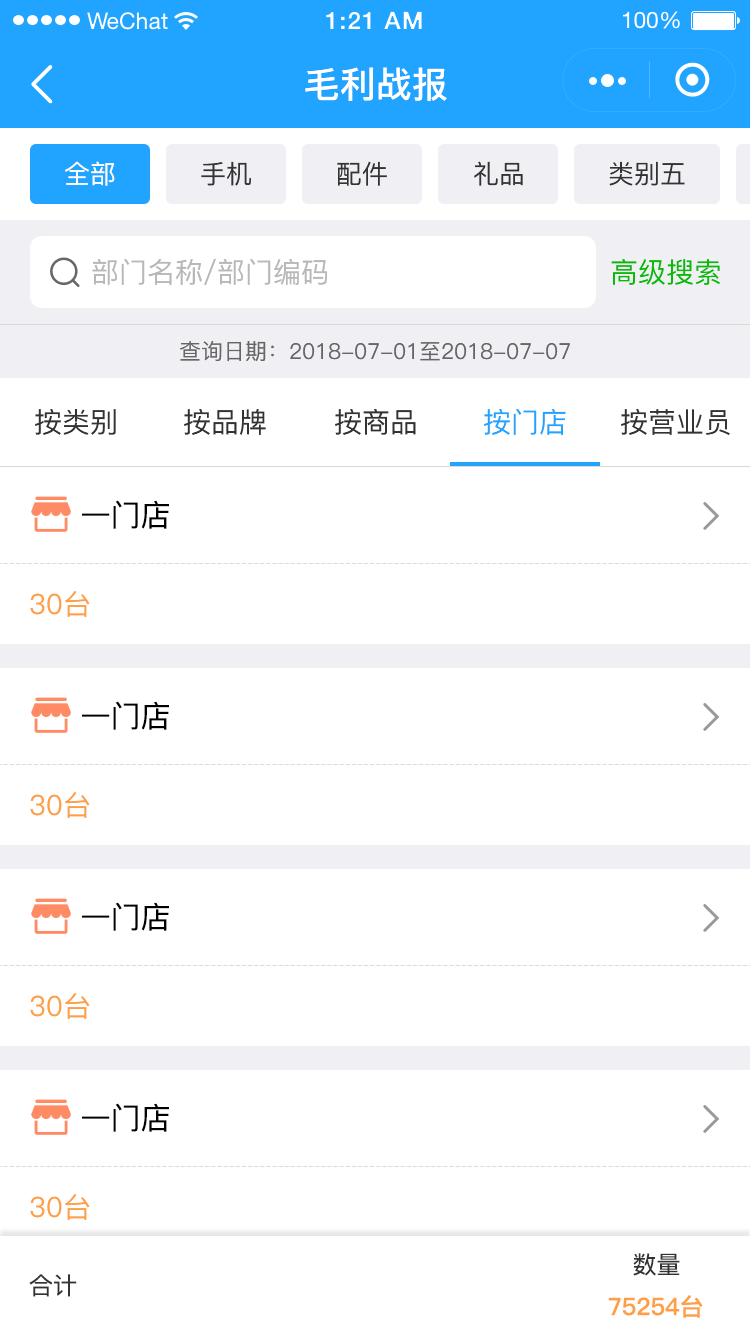
<style>
.page{position:relative;width:750px;height:1334px;background:#ffffff}
.page>*{position:absolute;margin:0}
.t1{font:36px "PingFang-SC-Bold";color:#ffffff}
.t2{font:26px "PingFang-SC-Medium";color:#ffffff}
.t3{font:26px "PingFang-SC-Medium";color:#333333}
.t4{font:28px "PingFang-SC-Medium";color:#b8b8b8}
.t5{font:28px "PingFang-SC-Medium";color:#09bb07}
.t6{font:22px "PingFang-SC-Medium";color:#666666}
.t7{font:28px "PingFang-SC-Medium";color:#333333}
.t8{font:28px "PingFang-SC-Medium";color:#21a4ff}
.t9{font:30px "PingFang-SC-Medium";color:#000000}
.t10{font:28px "PingFang-SC-Medium";color:#fe9f45}
.t11{font:24px "PingFang-SC-Medium";color:#333333}
.t12{font:24px "PingFang-SC-Bold";color:#fe9f45}
</style>
<div class="page">
<p class="t1" style="left:305px;top:67px;width:142px;height:34px">毛利战报</p>
<p class="t2" style="left:65px;top:161px;width:50px;height:25px">全部</p>
<p class="t3" style="left:201px;top:161px;width:50px;height:25px">手机</p>
<p class="t3" style="left:337px;top:161px;width:50px;height:25px">配件</p>
<p class="t3" style="left:474px;top:161px;width:49px;height:25px">礼品</p>
<p class="t3" style="left:609px;top:161px;width:76px;height:25px">类别五</p>
<p class="t4" style="left:92px;top:259px;width:235px;height:26px">部门名称/部门编码</p>
<p class="t5" style="left:611px;top:259px;width:109px;height:26px">高级搜索</p>
<p class="t6" style="left:180px;top:341px;width:390px;height:21px">查询日期：2018-07-01至2018-07-07</p>
<p class="t7" style="left:35px;top:409px;width:81px;height:26px">按类别</p>
<p class="t7" style="left:184px;top:409px;width:82px;height:26px">按品牌</p>
<p class="t7" style="left:335px;top:409px;width:81px;height:26px">按商品</p>
<p class="t8" style="left:484px;top:409px;width:82px;height:26px">按门店</p>
<p class="t7" style="left:621px;top:409px;width:109px;height:26px">按营业员</p>
<p class="t9" style="left:82px;top:500px;width:87px;height:29px">一门店</p>
<p class="t10" style="left:30px;top:591px;width:60px;height:26px">30台</p>
<p class="t9" style="left:82px;top:701px;width:87px;height:29px">一门店</p>
<p class="t10" style="left:30px;top:792px;width:60px;height:26px">30台</p>
<p class="t9" style="left:82px;top:902px;width:87px;height:29px">一门店</p>
<p class="t10" style="left:30px;top:993px;width:60px;height:26px">30台</p>
<p class="t9" style="left:82px;top:1103px;width:87px;height:29px">一门店</p>
<p class="t10" style="left:30px;top:1194px;width:60px;height:26px">30台</p>
<p class="t11" style="left:633px;top:1253px;width:47px;height:23px">数量</p>
<p class="t11" style="left:29px;top:1274px;width:48px;height:23px">合计</p>
<p class="t12" style="left:608px;top:1295px;width:95px;height:23px">75254台</p>
</div>
